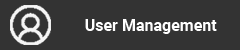
<style>
.page{position:relative;width:240px;height:50px;background:#333333}
.page>*{position:absolute;margin:0}
.t1{font:16px "Roboto-Bold";color:#ffffff}
</style>
<div class="page">
<p class="t1" style="left:85px;top:19px;width:132px;height:15px">User Management</p>
</div>
